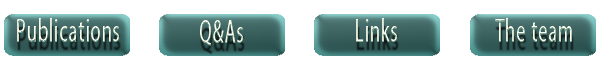
<style>
.page{position:relative;width:600px;height:63px;background:#ffffff}
.page>*{position:absolute;margin:0}
.t1{font:33.1px "MyriadPro-Regular";letter-spacing:0.06em;scale:0.54 1}
</style>
<div class="page">
<p class="t1" style="left:17px;top:18px;width:102px;height:24px">Publications</p>
<p class="t1" style="left:200px;top:20px;width:43px;height:26px">Q&amp;As</p>
<p class="t1" style="left:356px;top:18px;width:41px;height:24px">Links</p>
<p class="t1" style="left:495px;top:18px;width:77px;height:24px">The team</p>
</div>
